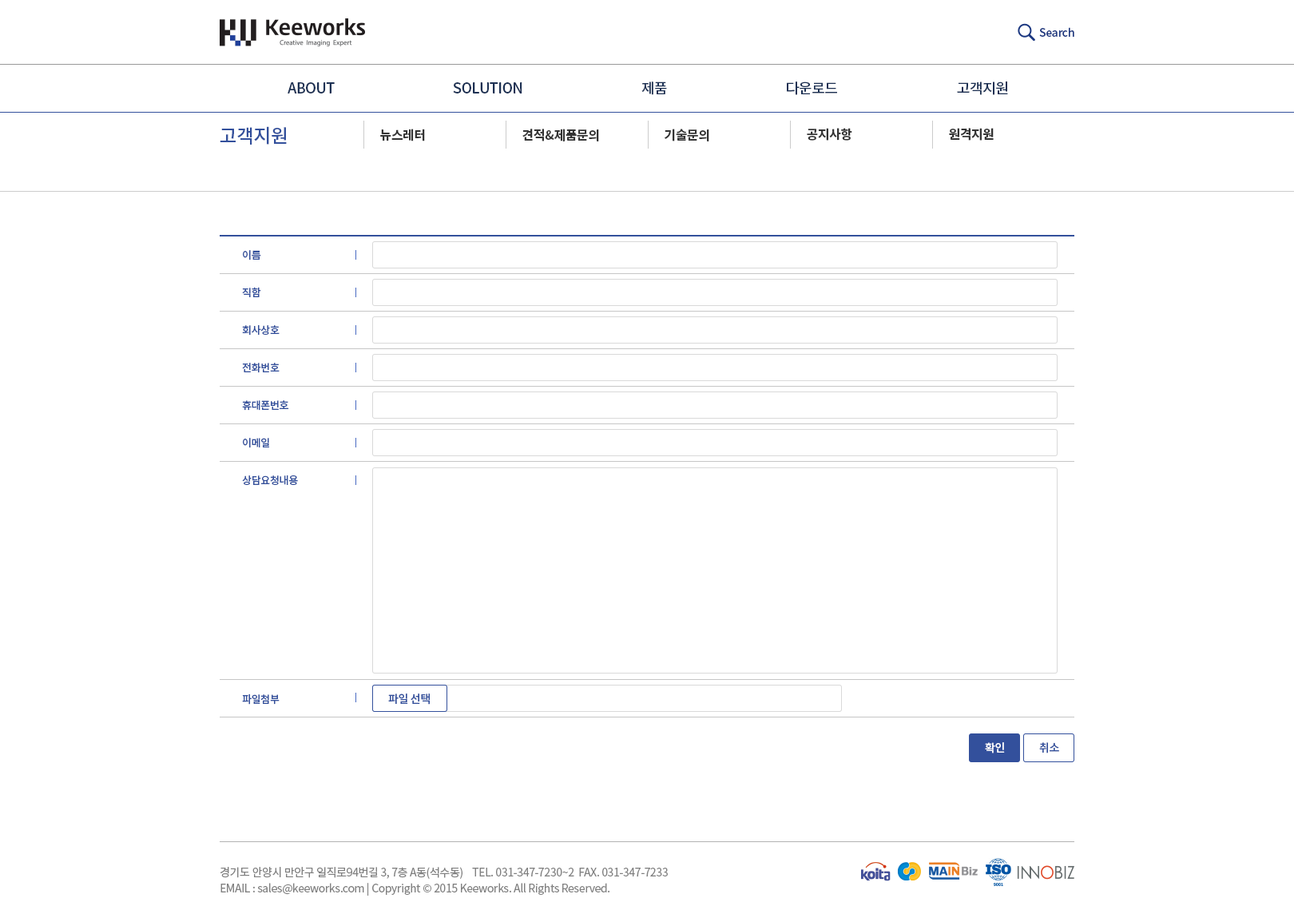
<style>
.page{position:relative;width:1294px;height:922px;background:#ffffff}
.page>*{position:absolute;margin:0}
.t1{font:11.2px "NotoSansCJKkr-Medium";letter-spacing:-0.025em;color:#1b3780}
.t2{font:14.4px "NotoSansCJKkr-Medium";letter-spacing:-0.025em;color:#1c3053;text-transform:uppercase}
.t3{font:19.2px "NotoSansCJKkr-Medium";letter-spacing:-0.025em;color:#33509c}
.t4{font:12.8px "NotoSansCJKkr-Bold";letter-spacing:-0.025em;color:#333333}
.t5{font:10.4px/37.5px "NotoSansCJKkr-Medium";letter-spacing:-0.025em;color:#33509c}
.t6{font:10.4px "NotoSansCJKkr-Medium";letter-spacing:-0.025em;color:#33509c}
.t7{font:11.2px "NotoSansCJKkr-Medium";letter-spacing:-0.025em;color:#33509c}
.t8{font:11.2px "NotoSansCJKkr-Medium";letter-spacing:-0.025em;color:#ffffff}
.t9{font:11.2px/16px "NotoSansCJKkr-Regular";letter-spacing:-0.025em;color:#808080}
</style>
<div class="page">
<p class="t1" style="left:1039px;top:27px;width:35px;height:10px">Search</p>
<p class="t2" style="left:288px;top:82px;width:47px;height:11px">ABOUT</p>
<p class="t2" style="left:453px;top:82px;width:69px;height:11px">SOLUTION</p>
<p class="t2" style="left:641px;top:81px;width:26px;height:14px">제품</p>
<p class="t2" style="left:787px;top:81px;width:50px;height:14px">다운로드</p>
<p class="t2" style="left:957px;top:81px;width:51px;height:14px">고객지원</p>
<p class="t3" style="left:220px;top:126px;width:67px;height:19px">고객지원</p>
<p class="t4" style="left:380px;top:129px;width:45px;height:12px">뉴스레터</p>
<p class="t4" style="left:522px;top:129px;width:77px;height:12px">견적&amp;제품문의</p>
<p class="t4" style="left:664px;top:129px;width:45px;height:12px">기술문의</p>
<p class="t4" style="left:807px;top:128px;width:45px;height:13px">공지사항</p>
<p class="t4" style="left:949px;top:128px;width:45px;height:13px">원격지원</p>
<p class="t5" style="left:242px;top:250px;width:56px;height:235px">이름<br>직함<br>회사상호<br>전화번호<br>휴대폰번호<br>이메일<br>상담요청내용</p>
<p class="t6" style="left:242px;top:693px;width:38px;height:11px">파일첨부</p>
<p class="t7" style="left:388px;top:693px;width:42px;height:11px">파일 선택</p>
<p class="t8" style="left:985px;top:742px;width:20px;height:11px">확인</p>
<p class="t7" style="left:1039px;top:742px;width:20px;height:11px">취소</p>
<p class="t9" style="left:220px;top:867px;width:448px;height:28px">경기도 안양시 만안구 일직로94번길 3, 7층 A동(석수동)    TEL. 031-347-7230~2  FAX. 031-347-7233<br>EMAIL : sales@keeworks.com | Copyright © 2015 Keeworks. All Rights Reserved.</p>
</div>
